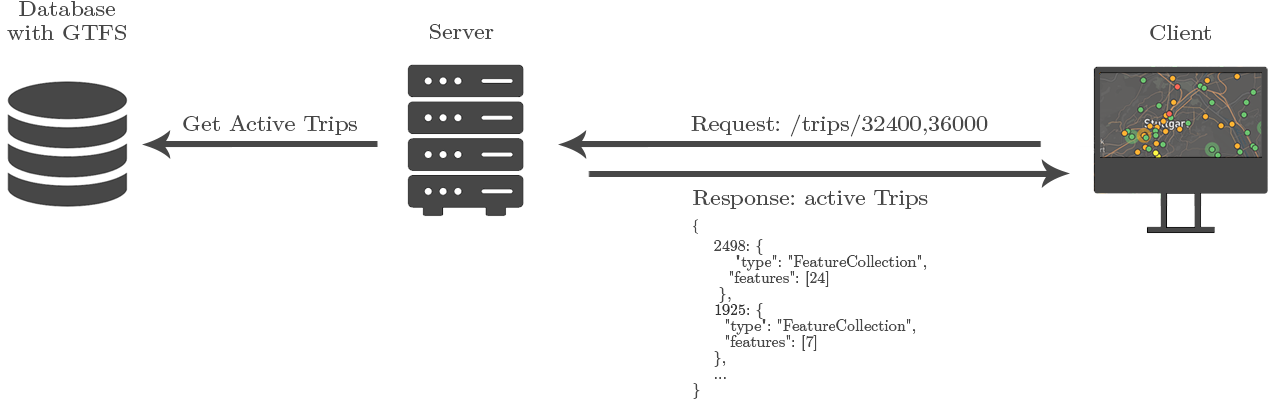
<style>
.page{position:relative;width:1268px;height:413px;background:#ffffff}
.page>*{position:absolute;margin:0}
.t1{font:21.6px/24px "LMMath-Regular";color:#474747;scale:1.11 1}
.t2{font:21.6px "LMMath-Regular";color:#474747;scale:1.11 1}
.t3{font:16px/16px "LMMath-Regular";color:#474747}
.t4{font:21.6px/36px "LMMath-Regular";color:#474747;scale:1.11 1}
.t5{font:14px/14px "LMMath-Regular";color:#474747}
.t6{font:16px/16px "LMMath-Regular";color:#333333}
</style>
<div class="page">
<p class="t1" style="left:7px;top:1px;width:119px;height:39px;text-align:center">Database<br>with GTFS</p>
<p class="t2" style="left:430px;top:24px;width:64px;height:15px">Server</p>
<p class="t2" style="left:1150px;top:25px;width:61px;height:15px">Client</p>
<p class="t2" style="left:183px;top:115px;width:174px;height:20px">Get Active Trips</p>
<p class="t2" style="left:691px;top:114px;width:297px;height:23px">Request: /trips/32400,36000</p>
<p class="t3" style="left:693px;top:190px;width:235px;height:209px"><span class="t4">Response: active Trips<br></span><span class="t5">{<br></span>  <br>    2498: {<br>        "type": "FeatureCollection",<br>     "features": [24]<br>     },<br>    <span class="t6">1925</span>: {<br>      "type": "FeatureCollection",<br>      "features": [7]<br>    },<br>    ...<br>}</p>
</div>
